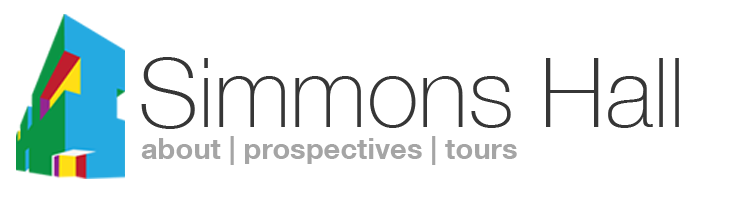
<style>
.page{position:relative;width:750px;height:200px;background:#ffffff}
.page>*{position:absolute;margin:0}
.t1{font:95.8px "HelveticaNeueLTCom-Th";color:#363636}
.t2{font:29.2px "HelveticaNeueLTCom-Bd";color:#a5a5a5}
</style>
<div class="page">
<p class="t1" style="left:141px;top:57px;width:538px;height:72px">Simmons Hall</p>
<p class="t2" style="left:141px;top:136px;width:376px;height:29px">about | prospectives | tours</p>
</div>
